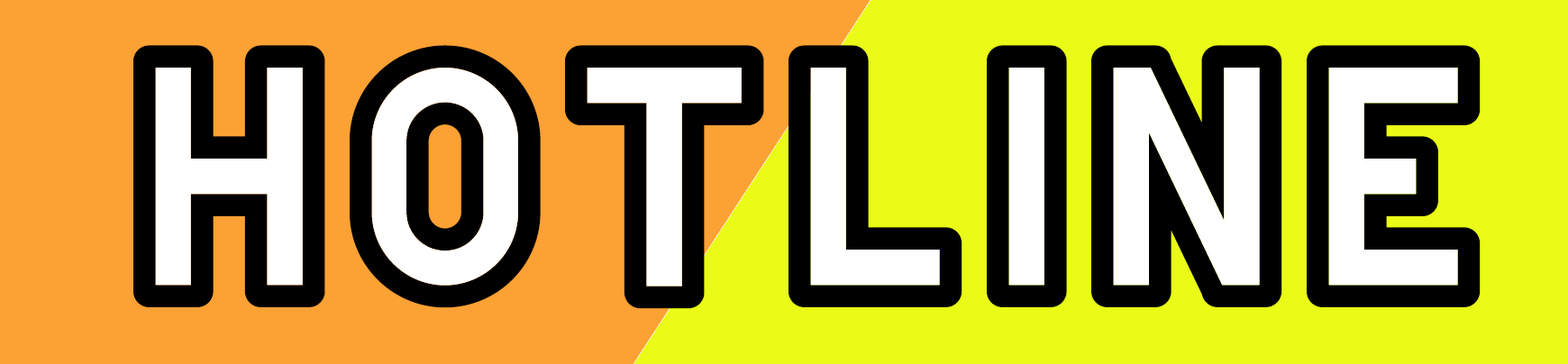
<style>
.page{position:relative;width:1568px;height:364px;background:#fca134}
.page>*{position:absolute;margin:0}
.t1{font:342.4px "HeltonOutlineBold";letter-spacing:-0.028em;color:#000000}
</style>
<div class="page">
<p class="t1" style="left:133px;top:45px;width:1348px;height:264px">HOTLINE</p>
</div>
